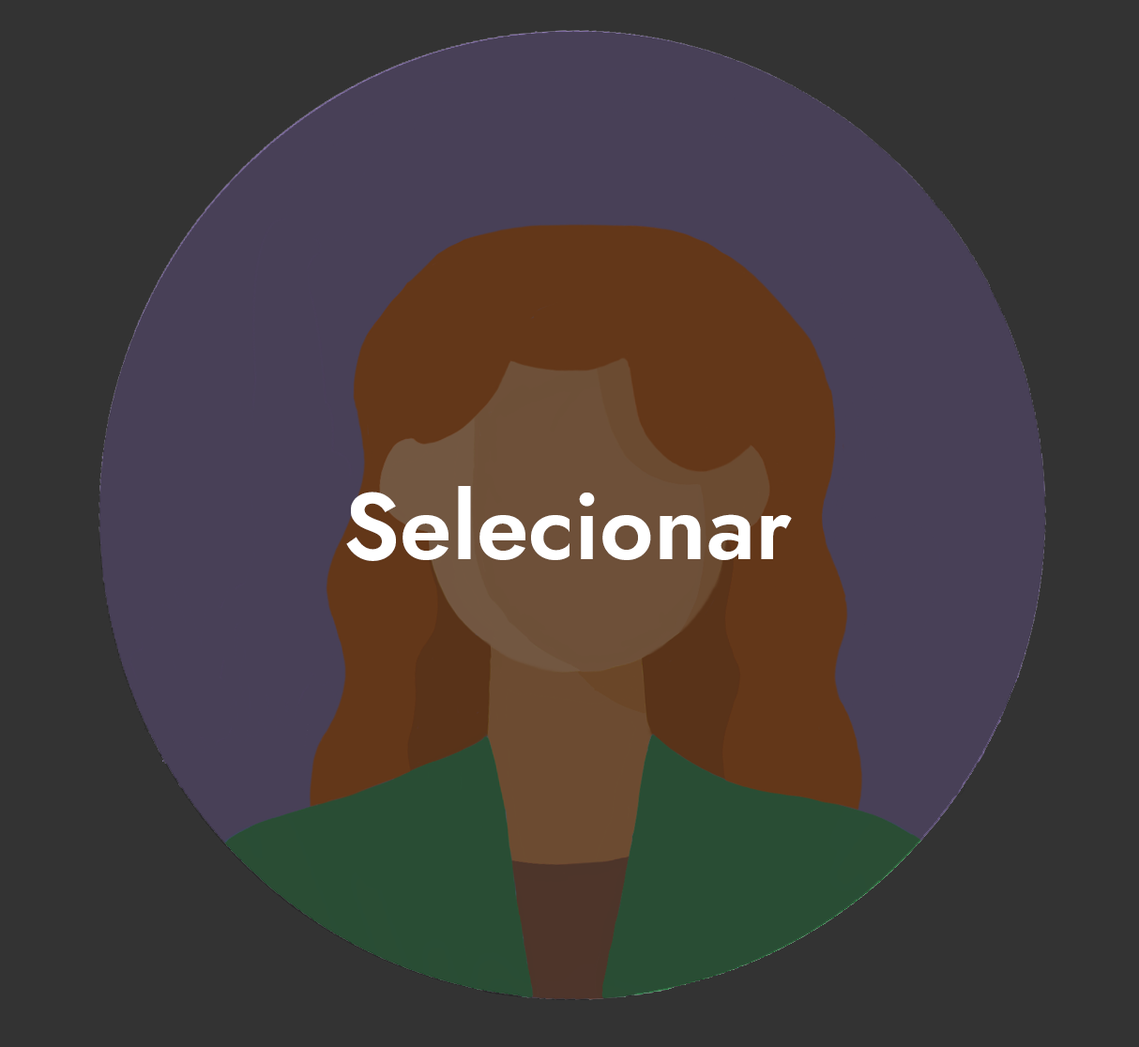
<style>
.page{position:relative;width:1139px;height:1047px;background:#333333}
.page>*{position:absolute;margin:0}
.t1{font:93.8px "Jost-SemiBold";color:#ffffff}
</style>
<div class="page">
<p class="t1" style="left:346px;top:486px;width:446px;height:75px">Selecionar</p>
</div>
